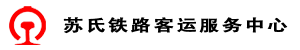
<style>
.page{position:relative;width:300px;height:50px;background:#ffffff}
.page>*{position:absolute;margin:0}
.t1{font:16.1px "AdobeHeitiStd-Regular";letter-spacing:0.1em;color:#000000;font-weight:bold;scale:1.26 1}
</style>
<div class="page">
<p class="t1" style="left:63px;top:17px;width:225px;height:17px">苏氏铁路客运服务中心</p>
</div>
